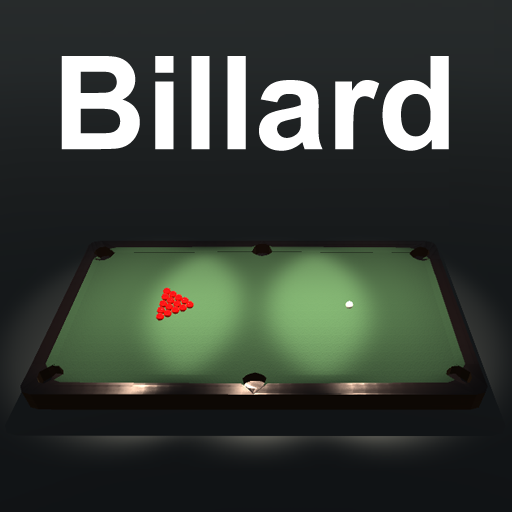
<style>
.page{position:relative;width:512px;height:512px}
.page>*{position:absolute;margin:0}
.t1{font:130px "Arial-BoldMT";color:#ffffff}
</style>
<div class="page">
<p class="t1" style="left:61px;top:56px;width:388px;height:95px">Billard</p>
</div>
